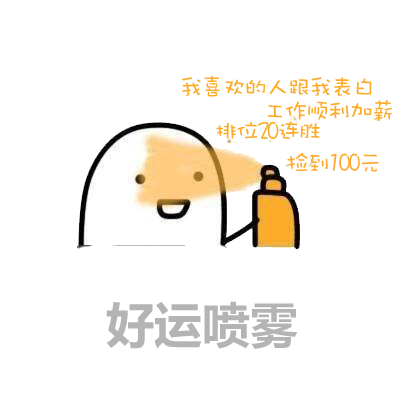
<style>
.page{position:relative;width:400px;height:400px;background:#ffffff}
.page>*{position:absolute;margin:0}
.t1{font:24px "DFWaWaW5";letter-spacing:-0.1em;color:#fdac29}
.t2{font:24px "DFWaWaW5";letter-spacing:-0.1em;color:#ffa830}
.t3{font:48px "MicrosoftYaHei-Bold";color:#b5b4b4}
</style>
<div class="page">
<p class="t1" style="left:182px;top:76px;width:190px;height:21px">我喜欢的人跟我表白</p>
<p class="t1" style="left:267px;top:100px;width:125px;height:21px">工作顺利加薪</p>
<p class="t1" style="left:216px;top:121px;width:104px;height:18px">排位20连胜</p>
<p class="t2" style="left:287px;top:152px;width:92px;height:20px">捡到100元</p>
<p class="t3" style="left:106px;top:301px;width:192px;height:48px">好运喷雾</p>
</div>
